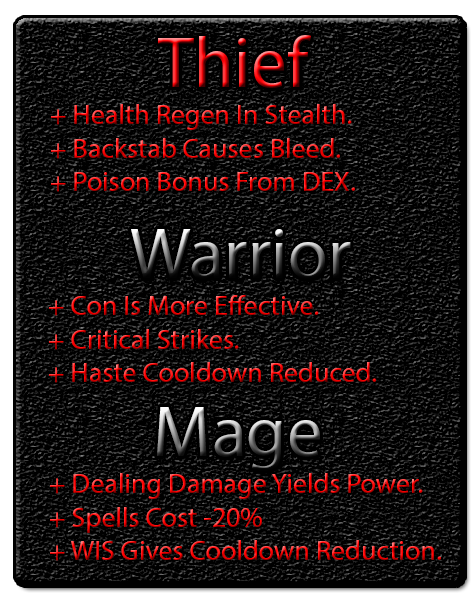
<style>
.page{position:relative;width:475px;height:600px;background:#000000}
.page>*{position:absolute;margin:0}
.t1{font:72px "MyriadPro-Regular"}
.t2{font:28px "MyriadPro-Regular"}
</style>
<div class="page">
<p class="t1" style="left:158px;top:35px;width:153px;height:53px">Thief</p>
<p class="t2" style="left:51px;top:104px;width:304px;height:88px">+ Health Regen In Stealth.<br>+ Backstab Causes Bleed.<br>+ Poison Bonus From DEX.</p>
<p class="t1" style="left:131px;top:229px;width:220px;height:50px">Warrior</p>
<p class="t2" style="left:49px;top:295px;width:327px;height:88px">+ Con Is More Effective.<br>+ Critical Strikes.<br>+ Haste Cooldown Reduced.</p>
<p class="t1" style="left:157px;top:407px;width:163px;height:64px">Mage</p>
<p class="t2" style="left:50px;top:473px;width:391px;height:88px">+ Dealing Damage Yields Power.<br>+ Spells Cost -20%<br>+ WIS Gives Cooldown Reduction.</p>
</div>
